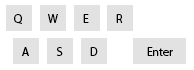
<style>
.page{position:relative;width:194px;height:70px;background:#ffffff}
.page>*{position:absolute;margin:0}
.t1{font:12px "MyriadPro-Regular";color:#000000}
</style>
<div class="page">
<p class="t1" style="left:14px;top:14px;width:8px;height:10px">Q</p>
<p class="t1" style="left:47px;top:14px;width:11px;height:9px">W</p>
<p class="t1" style="left:83px;top:14px;width:6px;height:9px">E</p>
<p class="t1" style="left:116px;top:14px;width:7px;height:9px">R</p>
<p class="t1" style="left:22px;top:47px;width:7px;height:9px">A</p>
<p class="t1" style="left:56px;top:47px;width:7px;height:9px">S</p>
<p class="t1" style="left:90px;top:47px;width:8px;height:9px">D</p>
<p class="t1" style="left:147px;top:47px;width:26px;height:9px">Enter</p>
</div>
